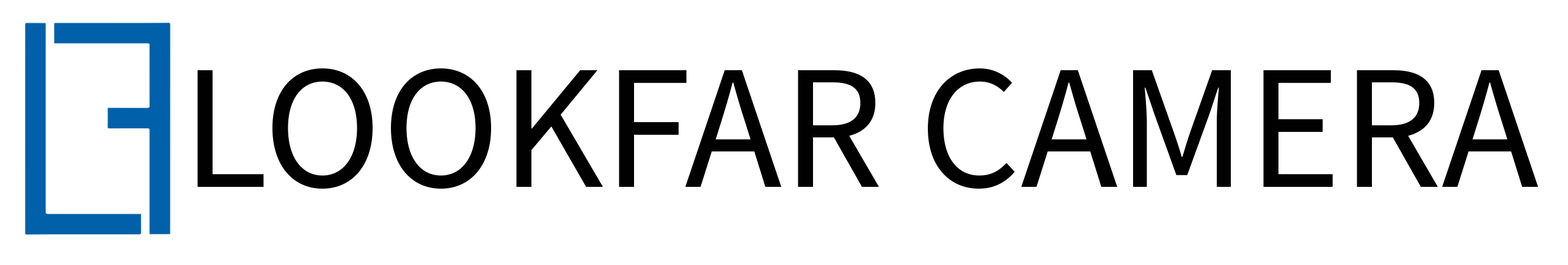
<style>
.page{position:relative;width:1568px;height:265px;background:#ffffff}
.page>*{position:absolute;margin:0}
.t1{font:178.2px "SourceSansPro-Regular";color:#010101}
</style>
<div class="page">
<p class="t1" style="left:197px;top:68px;width:1341px;height:121px">LOOKFAR CAMERA</p>
</div>
